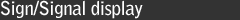
<style>
.page{position:relative;width:240px;height:20px;background:#333333}
.page>*{position:absolute;margin:0}
.t1{font:19px "BellGothicStd-Bold";letter-spacing:-0.025em;color:#ffffff}
</style>
<div class="page">
<p class="t1" style="left:0px;top:0px;width:143px;height:19px">Sign/Signal display</p>
</div>
